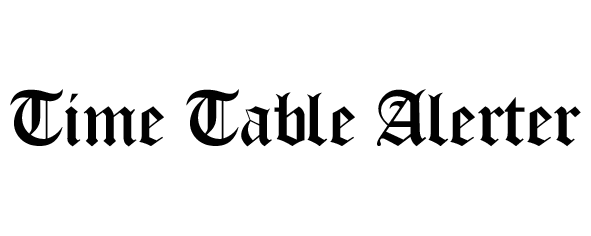
<style>
.page{position:relative;width:591px;height:236px;background:#ffffff}
.page>*{position:absolute;margin:0}
.t1{font:70.8px "AKbalthom-Khmer-21st";color:#010101}
</style>
<div class="page">
<p class="t1" style="left:10px;top:89px;width:571px;height:58px">Time Table Alerter</p>
</div>
